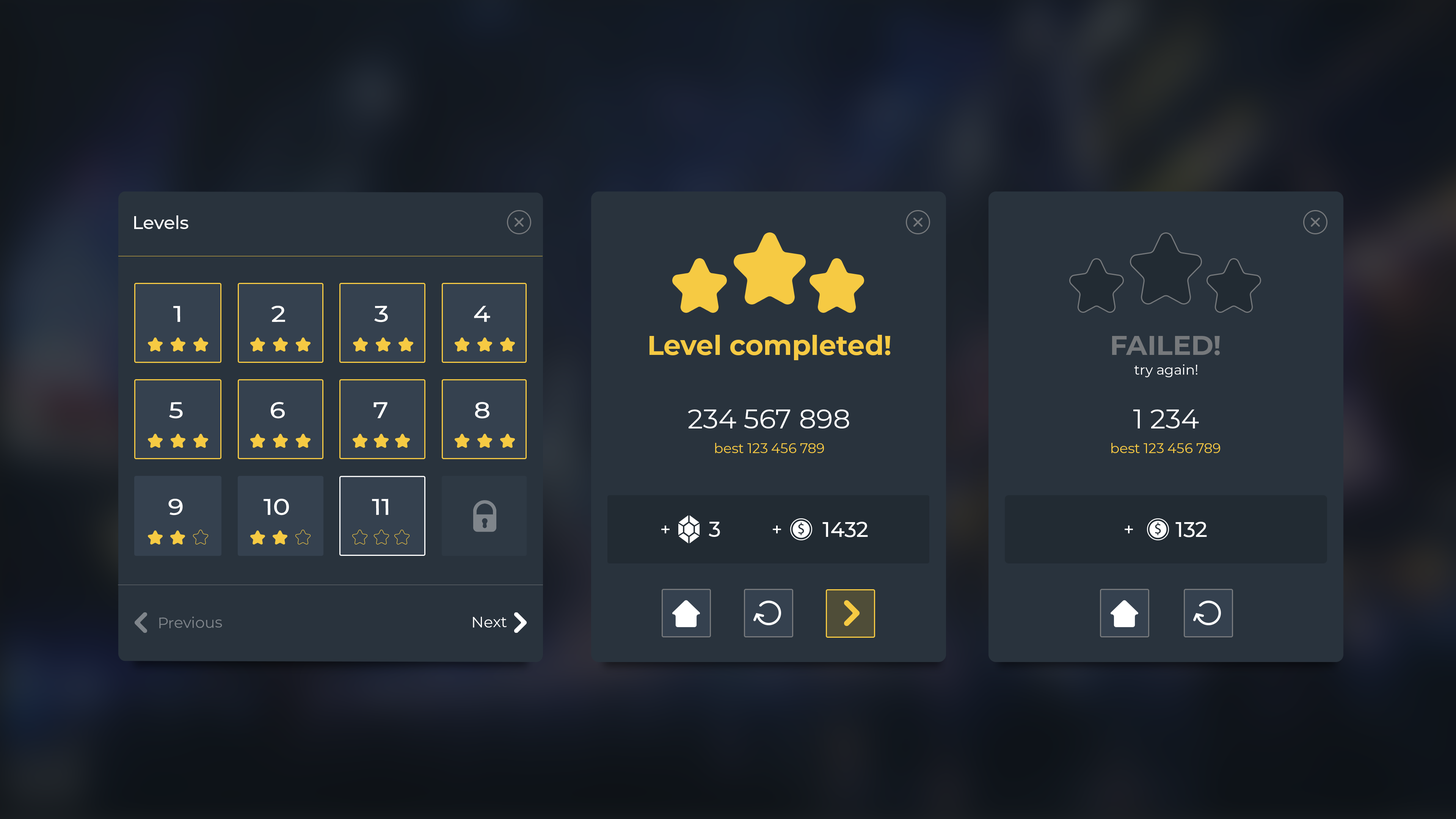
<style>
.page{position:relative;width:1456px;height:819px;background:#29333d}
.page>*{position:absolute;margin:0}
.t1{font:18.2px "Montserrat-Medium";color:#ffffff}
.t2{font:22.7px "Montserrat-Medium";color:#ffffff;scale:1.13 1}
.t3{font:27.3px "Montserrat-Bold";color:#f6ca43}
.t4{font:27.3px "Montserrat-Bold";color:#76797c}
.t5{font:13.6px "Montserrat-Regular";color:#ffffff}
.t6{font:27.3px "Montserrat-Regular";color:#ffffff}
.t7{font:13.6px "Montserrat-Regular";color:#f6ca43}
.t8{font:21.2px "Montserrat-Medium";color:#ffffff}
.t9{font:15.2px "Montserrat-Regular";color:#7f858b}
.t10{font:15.2px "Montserrat-Regular";color:#ffffff}
</style>
<div class="page">
<p class="t1" style="left:134px;top:215px;width:54px;height:14px">Levels</p>
<p class="t2" style="left:173px;top:306px;width:7px;height:16px">1</p>
<p class="t2" style="left:271px;top:306px;width:14px;height:16px">2</p>
<p class="t2" style="left:374px;top:306px;width:14px;height:16px">3</p>
<p class="t2" style="left:474px;top:306px;width:16px;height:16px">4</p>
<p class="t3" style="left:650px;top:335px;width:240px;height:25px">Level completed!</p>
<p class="t4" style="left:1112px;top:336px;width:108px;height:19px">FAILED!</p>
<p class="t5" style="left:1134px;top:364px;width:63px;height:13px">try again!</p>
<p class="t2" style="left:169px;top:402px;width:14px;height:17px">5</p>
<p class="t2" style="left:271px;top:402px;width:14px;height:17px">6</p>
<p class="t2" style="left:373px;top:402px;width:15px;height:16px">7</p>
<p class="t2" style="left:475px;top:402px;width:14px;height:17px">8</p>
<p class="t6" style="left:688px;top:409px;width:161px;height:19px">234 567 898</p>
<p class="t6" style="left:1133px;top:409px;width:66px;height:19px">1 234</p>
<p class="t7" style="left:715px;top:443px;width:109px;height:10px">best 123 456 789</p>
<p class="t7" style="left:1111px;top:443px;width:109px;height:10px">best 123 456 789</p>
<p class="t2" style="left:168px;top:499px;width:15px;height:16px">9</p>
<p class="t2" style="left:264px;top:499px;width:25px;height:16px">10</p>
<p class="t2" style="left:372px;top:499px;width:16px;height:16px">11</p>
<p class="t8" style="left:709px;top:522px;width:11px;height:15px">3</p>
<p class="t8" style="left:822px;top:522px;width:46px;height:15px">1432</p>
<p class="t8" style="left:1175px;top:522px;width:32px;height:15px">132</p>
<p class="t1" style="left:661px;top:526px;width:9px;height:7px">+</p>
<p class="t1" style="left:773px;top:526px;width:8px;height:7px">+</p>
<p class="t1" style="left:1125px;top:526px;width:8px;height:7px">+</p>
<p class="t9" style="left:159px;top:617px;width:63px;height:11px">Previous</p>
<p class="t10" style="left:473px;top:617px;width:34px;height:11px">Next</p>
</div>
